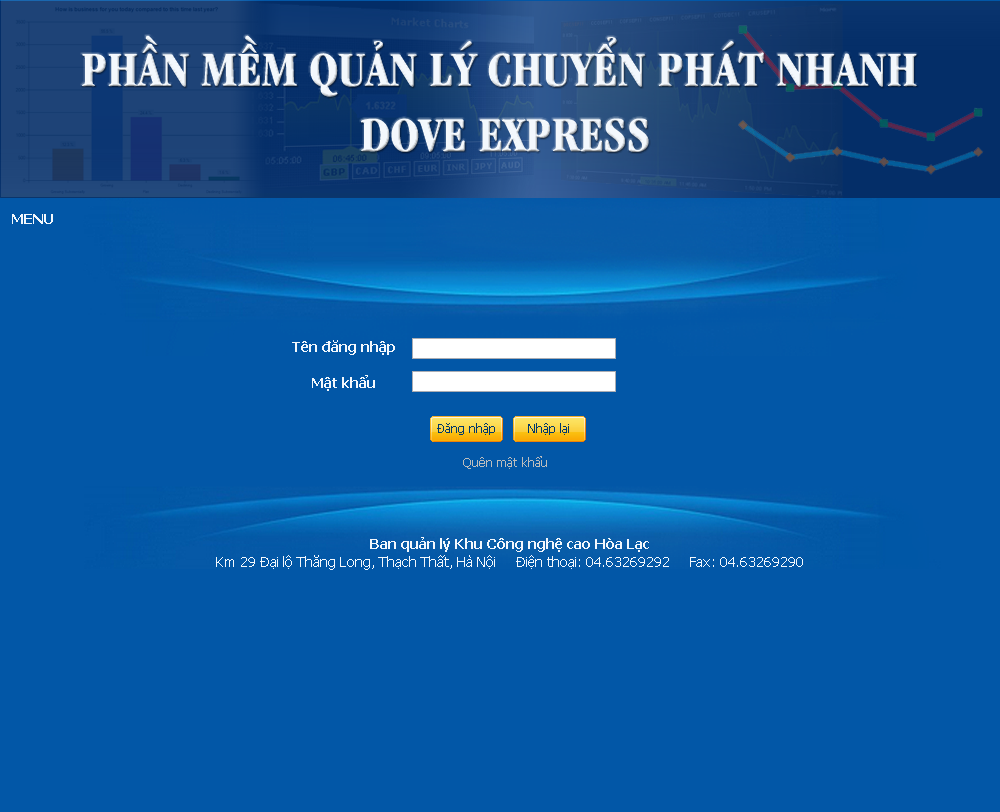
<style>
.page{position:relative;width:1000px;height:812px;background:#0257a7}
.page>*{position:absolute;margin:0}
.t1{font:50.7px/65.2px "UVNGiaDinhHepBold";color:#f3f8fd}
.t2{font:14px "Tahoma-Bold";color:#f3f8fd}
.t3{font:14px/18px "Tahoma-Bold";color:#f3f8fd}
.t4{font:12px "Tahoma";color:#bcbdbd}
.t5{font:14px/18px "Tahoma";color:#f3f8fd}
</style>
<div class="page">
<p class="t1" style="left:82px;top:35px;width:835px;height:117px;text-align:center">PHẦN MỀM QUẢN LÝ CHUYỂN PHÁT NHANH <br>DOVE EXPRESS</p>
<p class="t2" style="left:12px;top:214px;width:41px;height:10px">MENU</p>
<p class="t3" style="left:292px;top:340px;width:103px;height:51px;text-align:center">Tên đăng nhập<br><br>Mật khẩu</p>
<p class="t4" style="left:463px;top:456px;width:84px;height:13px">Quên mật khẩu</p>
<p class="t5" style="left:216px;top:537px;width:587px;height:33px;text-align:center"><span class="t3">Ban quản lý Khu Công nghệ cao Hòa Lạc<br></span>Km 29 Đại lộ Thăng Long, Thạch Thất, Hà Nội     Điện thoại: 04.63269292     Fax: 04.63269290</p>
</div>
